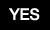
<style>
.page{position:relative;width:50px;height:30px;background:#000000}
.page>*{position:absolute;margin:0}
.t1{font:16px "HelveticaNeue-Medium";letter-spacing:-0.01em;color:#ffffff}
</style>
<div class="page">
<p class="t1" style="left:9px;top:8px;width:31px;height:13px">YES</p>
</div>
